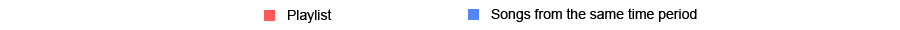
<style>
.page{position:relative;width:900px;height:30px;background:#ffffff}
.page>*{position:absolute;margin:0}
.t1{font:14px "ArialMT";color:#000000}
</style>
<div class="page">
<p class="t1" style="left:288px;top:9px;width:44px;height:14px">Playlist</p>
<p class="t1" style="left:491px;top:8px;width:206px;height:14px">Songs from the same time period</p>
</div>
